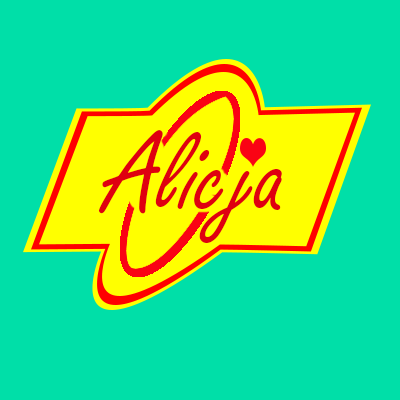
<style>
.page{position:relative;width:400px;height:400px;background:#00dfa8}
.page>*{position:absolute;margin:0}
.t1{font:121.6px "FreestyleScript-Regular";color:#df0010;scale:0.96 1}
</style>
<div class="page">
<p class="t1" style="left:98px;top:130px;width:184px;height:113px">Alicja</p>
</div>
